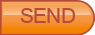
<style>
.page{position:relative;width:95px;height:35px}
.page>*{position:absolute;margin:0}
.t1{font:33.2px "Kartika";letter-spacing:-0.025em;color:#b64b3c}
</style>
<div class="page">
<p class="t1" style="left:20px;top:8px;width:55px;height:15px">SEND</p>
</div>
